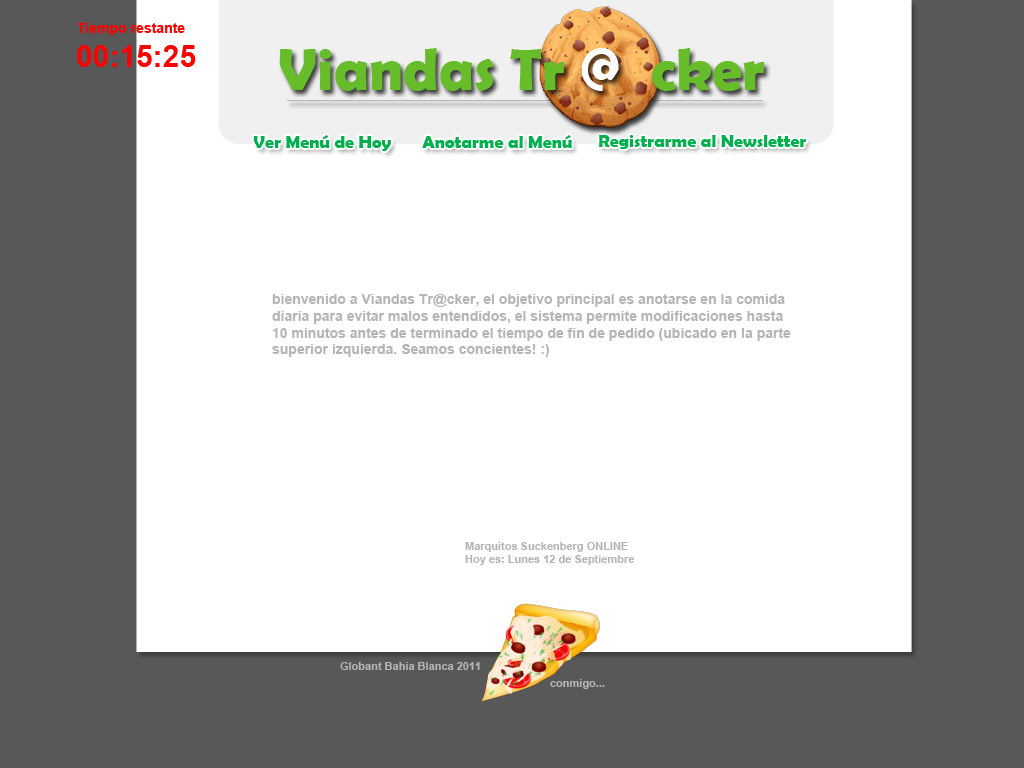
<style>
.page{position:relative;width:1024px;height:768px;background:#ffffff}
.page>*{position:absolute;margin:0}
.t1{font:14px "Arial-BoldMT";color:#ff0000}
.t2{font:30px "Arial-BoldMT";color:#ff0000}
.t3{font:60px "BerlinSansFBDemi-Bold";color:#66bc29}
.t4{font:60px "BerlinSansFBDemi-Bold";color:#ffffff}
.t5{font:18px "BerlinSansFBDemi-Bold";color:#00af4d}
.t6{font:14px "Arial-BoldMT";color:#b5b5b5}
.t7{font:11px "Arial-BoldMT";color:#b5b5b5}
</style>
<div class="page">
<p class="t1" style="left:77px;top:23px;width:108px;height:13px">Tiempo restante</p>
<p class="t2" style="left:77px;top:45px;width:119px;height:22px">00:15:25</p>
<p class="t3" style="left:279px;top:48px;width:486px;height:43px">Viandas Tr <span class="t4">@  </span>cker</p>
<p class="t5" style="left:253px;top:135px;width:138px;height:16px">Ver Menú de Hoy</p>
<p class="t5" style="left:422px;top:135px;width:150px;height:13px">Anotarme al Menú</p>
<p class="t5" style="left:599px;top:135px;width:208px;height:14px">Registrarme al Newsletter</p>
<p class="t6" style="left:272px;top:294px;width:519px;height:63px">bienvenido a Viandas Tr@cker, el objetivo principal es anotarse en la comida<br>diaria para evitar malos entendidos, el sistema permite modificaciones hasta<br>10 minutos antes de terminado el tiempo de fin de pedido (ubicado en la parte <br>superior izquierda. Seamos concientes! :)</p>
<p class="t7" style="left:465px;top:542px;width:169px;height:23px">Marquitos Suckenberg ONLINE<br>Hoy es: Lunes 12 de Septiembre</p>
<p class="t7" style="left:340px;top:662px;width:140px;height:8px">Globant Bahia Blanca 2011</p>
<p class="t7" style="left:550px;top:679px;width:55px;height:10px">conmigo...</p>
</div>
